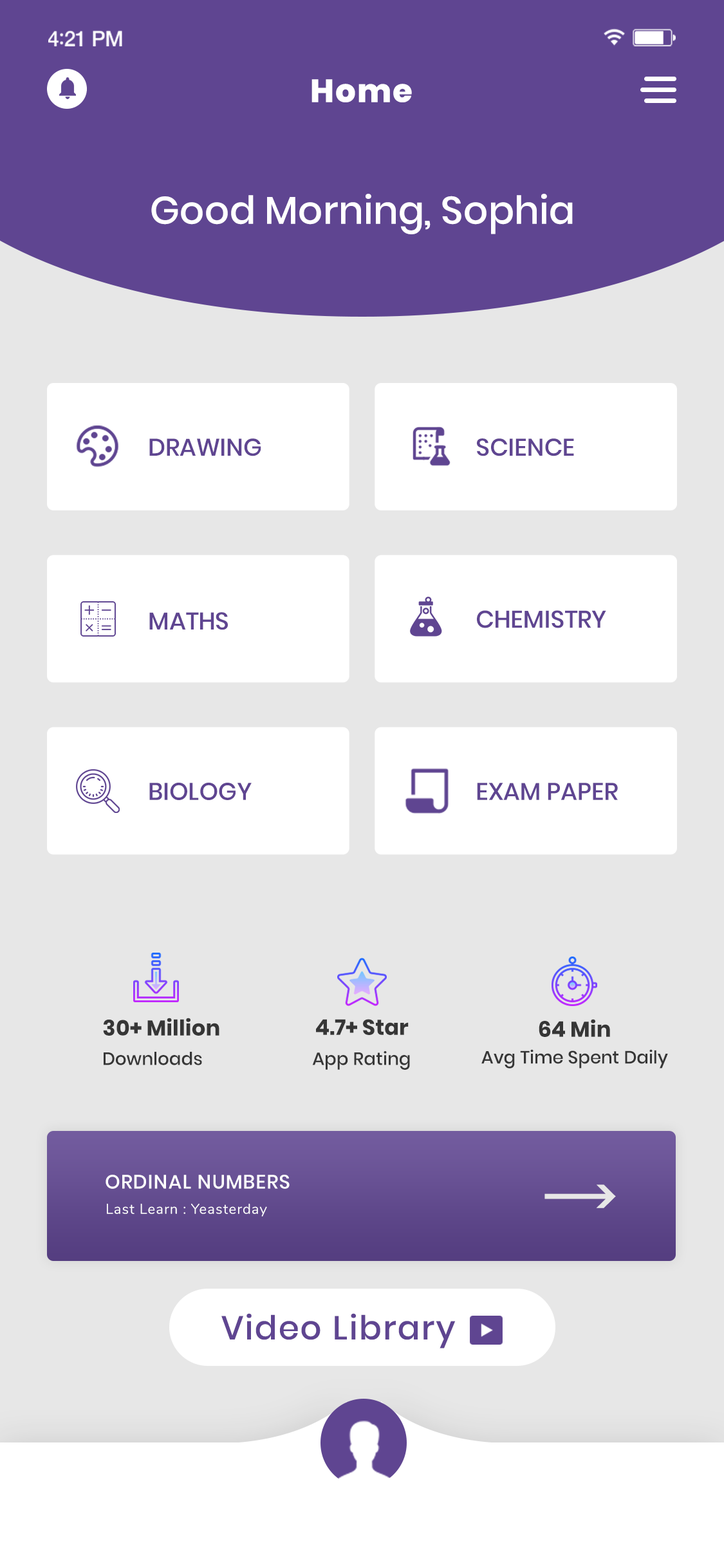
<style>
.page{position:relative;width:724px;height:1568px;background:#e7e7e7}
.page>*{position:absolute;margin:0}
.t1{font:32.2px "Poppins-ExtraBold";letter-spacing:0.04em;color:#ffffff}
.t2{font:38.6px "Poppins-Medium";color:#ffffff}
.t3{font:24.2px "Poppins-Medium";letter-spacing:-0.005em;color:#5f4591}
.t4{font:21.7px "Poppins-Bold";color:#363636}
.t5{font:17.8px "Poppins-Medium";color:#363636}
.t6{font:19.3px "Poppins-Medium";letter-spacing:0.04em;color:#ffffff}
.t7{font:51.5px "Poppins-Medium";letter-spacing:-0.38em;color:#e7e7e7}
.t8{font:14.2px "Nunito-Regular";letter-spacing:0.04em;color:#ffffff}
.t9{font:33.2px "Poppins-Medium";letter-spacing:0.04em;color:#5f4591}
</style>
<div class="page">
<p class="t1" style="left:312px;top:79px;width:100px;height:23px">Home</p>
<p class="t2" style="left:151px;top:194px;width:422px;height:40px">Good Morning, Sophia</p>
<p class="t3" style="left:149px;top:438px;width:112px;height:18px">DRAWING</p>
<p class="t3" style="left:477px;top:438px;width:97px;height:18px">SCIENCE</p>
<p class="t3" style="left:149px;top:612px;width:79px;height:18px">MATHS</p>
<p class="t3" style="left:477px;top:610px;width:129px;height:18px">CHEMISTRY</p>
<p class="t3" style="left:149px;top:782px;width:103px;height:18px">BIOLOGY</p>
<p class="t3" style="left:477px;top:783px;width:141px;height:17px">EXAM PAPER</p>
<p class="t4" style="left:103px;top:1018px;width:116px;height:18px">30+ Million</p>
<p class="t4" style="left:316px;top:1019px;width:93px;height:16px">4.7+ Star</p>
<p class="t4" style="left:539px;top:1019px;width:71px;height:18px">64 Min</p>
<p class="t5" style="left:481px;top:1049px;width:187px;height:20px">Avg Time Spent Daily</p>
<p class="t5" style="left:104px;top:1052px;width:98px;height:13px">Downloads</p>
<p class="t5" style="left:312px;top:1051px;width:98px;height:19px">App Rating</p>
<p class="t6" style="left:106px;top:1175px;width:184px;height:14px">ORDINAL NUMBERS</p>
<p class="t7" style="left:545px;top:1184px;width:71px;height:24px">--------&gt;</p>
<p class="t8" style="left:107px;top:1204px;width:160px;height:13px">Last Learn : Yeasterday</p>
<p class="t9" style="left:221px;top:1313px;width:235px;height:36px">Video Library</p>
</div>
